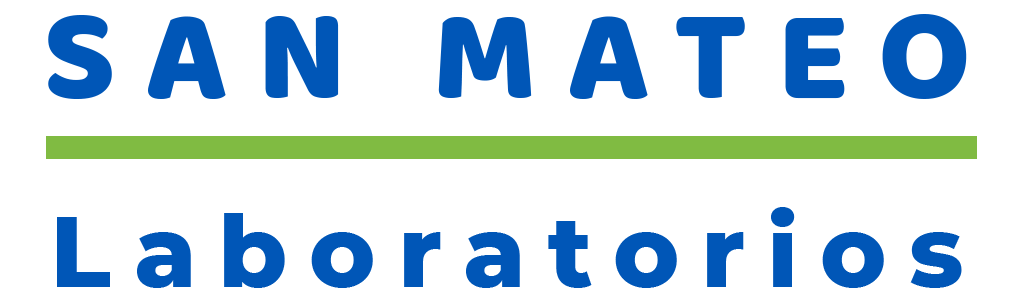
<style>
.page{position:relative;width:1024px;height:300px;background:#ffffff}
.page>*{position:absolute;margin:0}
.t1{font:132px "Baloo";letter-spacing:0.22em;color:#0056b7;text-transform:uppercase}
.t2{font:99.6px "Montserrat-ExtraBold";letter-spacing:0.22em;color:#0056b7}
</style>
<div class="page">
<p class="t1" style="left:48px;top:14px;width:919px;height:85px">San Mateo</p>
<p class="t2" style="left:57px;top:207px;width:905px;height:81px">Laboratorios</p>
</div>
